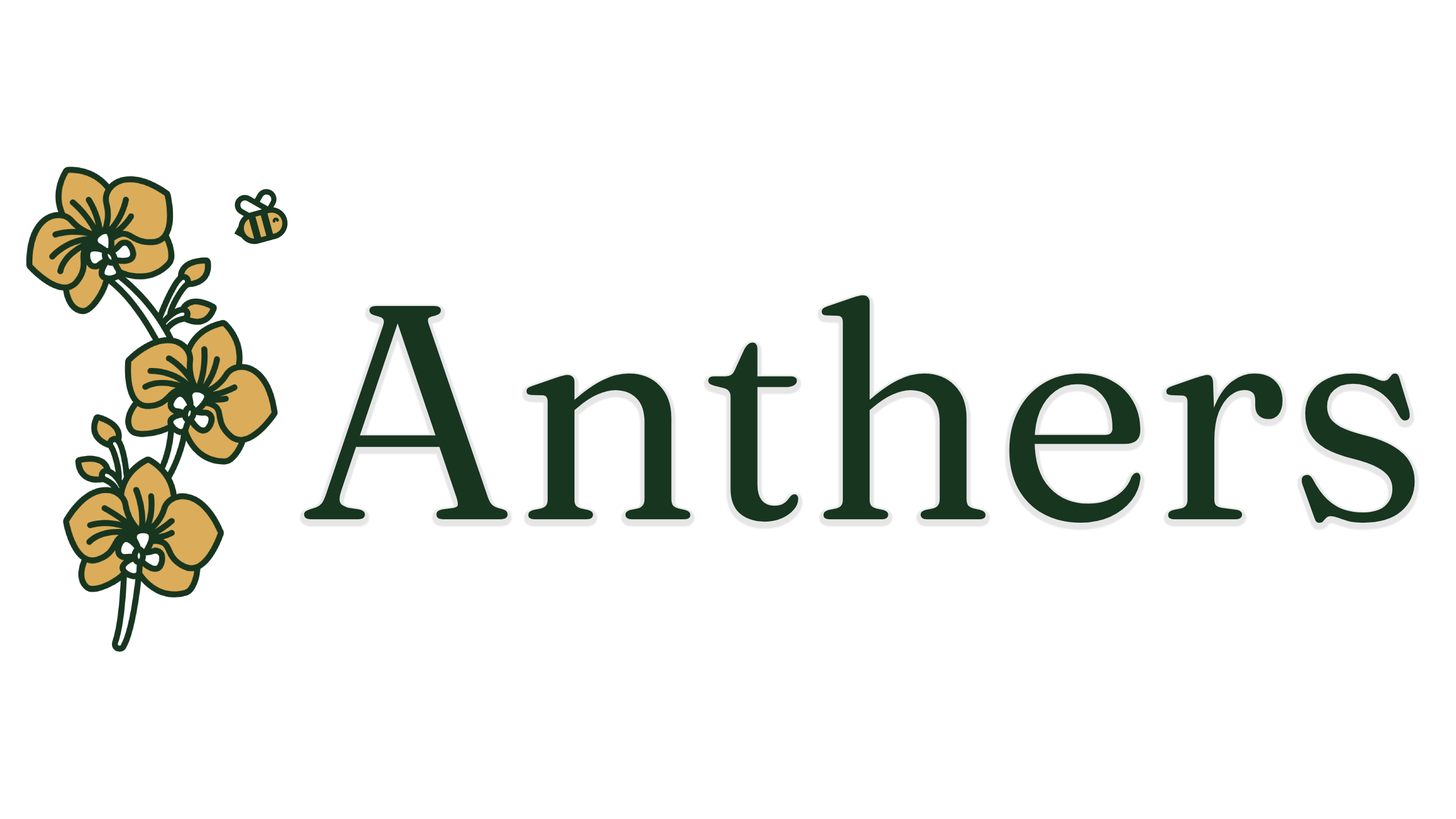
<style>
.page{position:relative;width:1456px;height:819px;background:#ffffff}
.page>*{position:absolute;margin:0}
.t1{font:304.7px "Fraunces-SemiBold_9.000opsz_350.000wght_0.000SOFT_1.000WONK";color:#17351f}
</style>
<div class="page">
<p class="t1" style="left:304px;top:295px;width:1111px;height:228px">Anthers</p>
</div>
